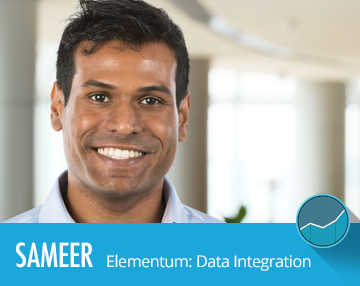
<style>
.page{position:relative;width:360px;height:286px}
.page>*{position:absolute;margin:0}
.t1{font:32px "Futura-CondensedMedium";letter-spacing:-0.01em;color:#ffffff}
.t2{font:16px "OpenSans";letter-spacing:-0.025em;color:#ffffff}
</style>
<div class="page">
<p class="t1" style="left:16px;top:242px;width:77px;height:26px">SAMEER</p>
<p class="t2" style="left:107px;top:254px;width:204px;height:17px">Elementum: Data Integration</p>
</div>
